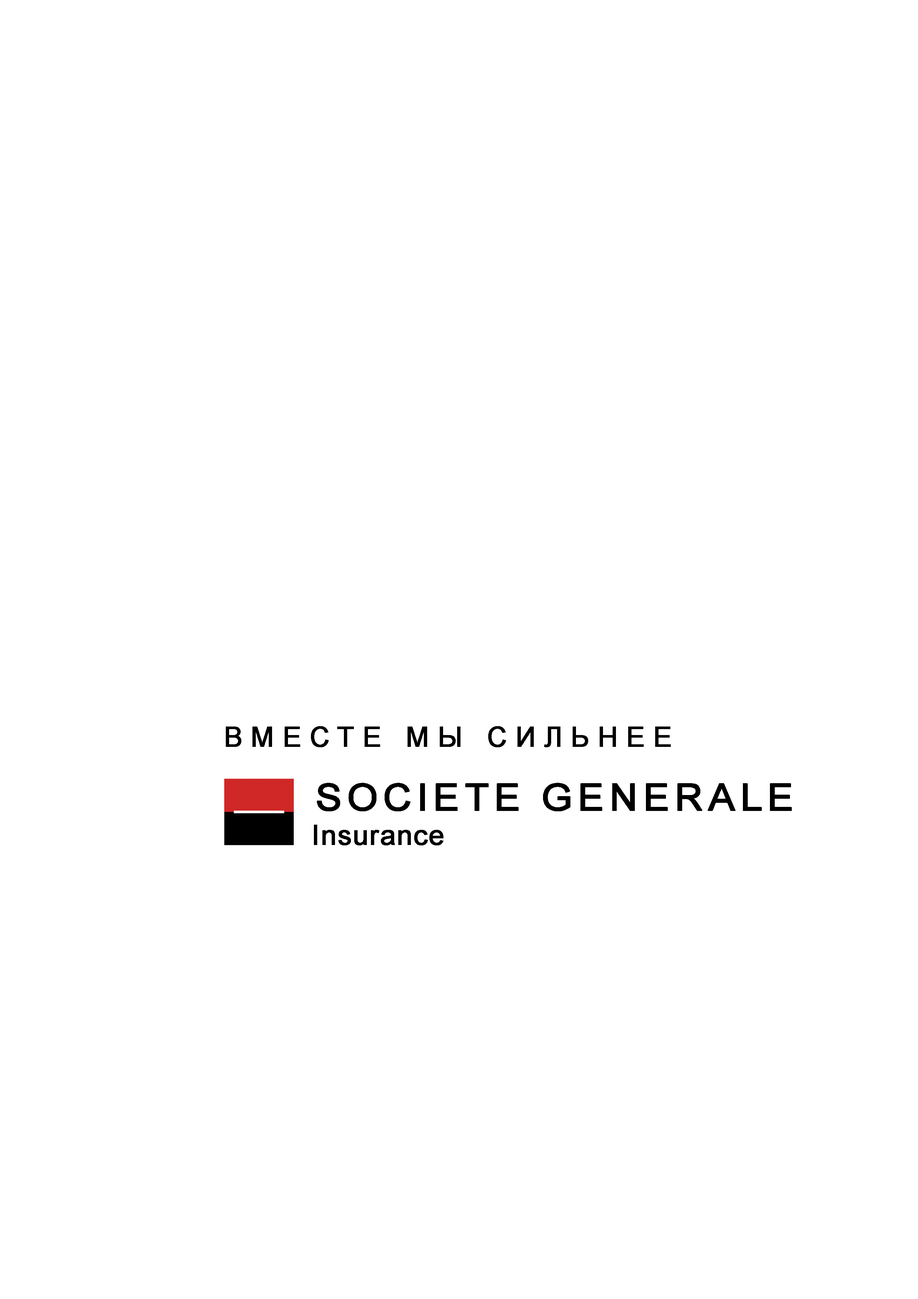
<style>
.page{position:relative;width:918px;height:1299px;background:#ffffff}
.page>*{position:absolute;margin:0}
.t1{font:27.8px "ArialMT";letter-spacing:0.28em;color:#000000;font-weight:bold}
.t2{font:37px "ArialMT";letter-spacing:0.1em;color:#000000;font-weight:bold;scale:1.07 1}
.t3{font:27.8px "ArialMT";letter-spacing:0.02em;color:#000000;font-weight:bold}
</style>
<div class="page">
<p class="t1" style="left:226px;top:726px;width:445px;height:21px">ВМЕСТЕ МЫ СИЛЬНЕЕ</p>
<p class="t2" style="left:317px;top:783px;width:475px;height:28px">SOCIETE GENERALE</p>
<p class="t3" style="left:314px;top:824px;width:130px;height:21px">Insurance</p>
</div>
